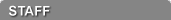
<style>
.page{position:relative;width:171px;height:20px;background:#858585}
.page>*{position:absolute;margin:0}
.t1{font:13.3px "Arial-BoldMT";color:#ffffff}
</style>
<div class="page">
<p class="t1" style="left:9px;top:5px;width:41px;height:11px">STAFF</p>
</div>
